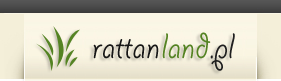
<style>
.page{position:relative;width:281px;height:81px}
.page>*{position:absolute;margin:0}
.t1{font:40px "GiddyupStd";color:#161616}
.t2{font:40px "GiddyupStd";color:#548323}
.t3{font:40px "GiddyupStd";color:#202020}
</style>
<div class="page">
<p class="t1" style="left:93px;top:39px;width:66px;height:20px">rattan</p>
<p class="t2" style="left:162px;top:32px;width:73px;height:39px">land<span class="t3">.pl</span></p>
</div>
